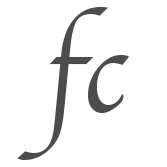
<style>
.page{position:relative;width:167px;height:167px;background:#ffffff}
.page>*{position:absolute;margin:0}
.t1{font:120px "Apple-Chancery";color:#4c4c4c}
</style>
<div class="page">
<p class="t1" style="left:17px;top:7px;width:113px;height:153px">fc</p>
</div>
